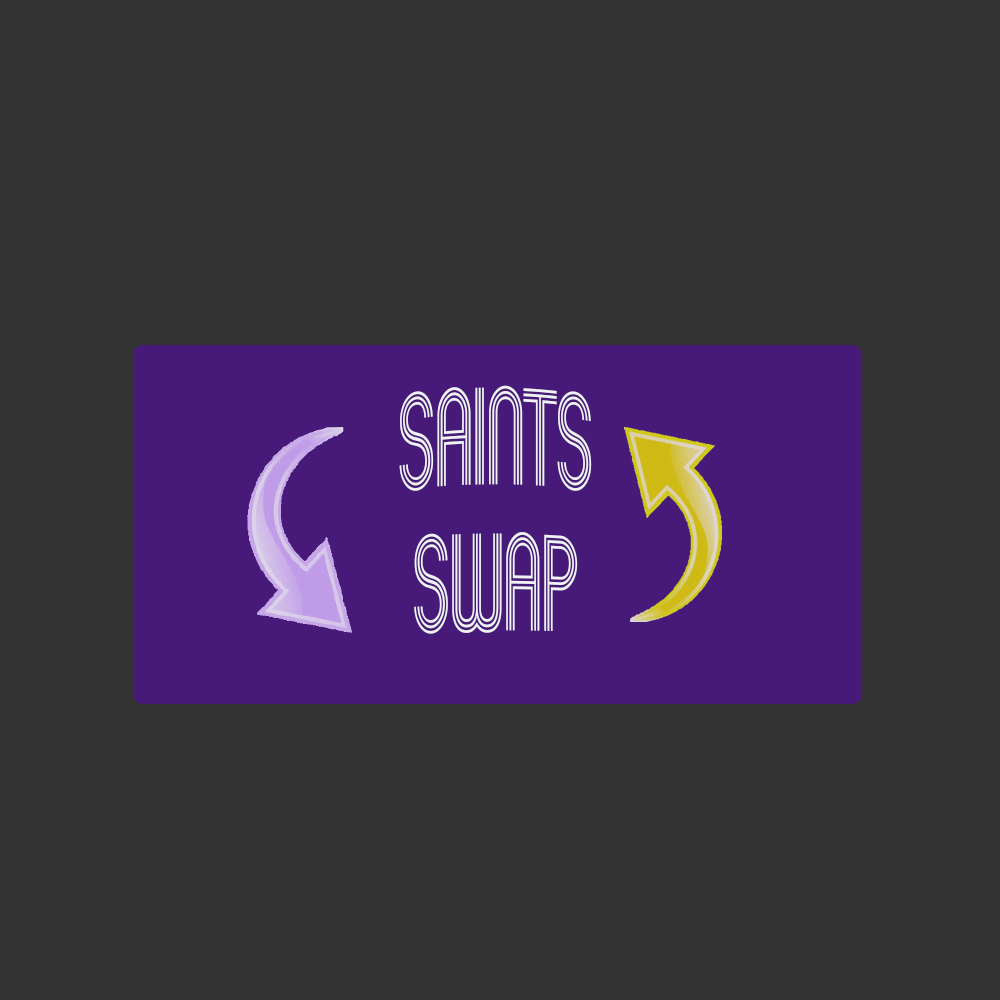
<style>
.page{position:relative;width:1000px;height:1000px;background:#333333}
.page>*{position:absolute;margin:0}
.t1{font:66.7px "Mexcellent-Regular";color:#f1f2f5}
</style>
<div class="page">
<p class="t1" style="left:399px;top:385px;width:193px;height:249px;text-align:center">Saints<br>Swap</p>
</div>
